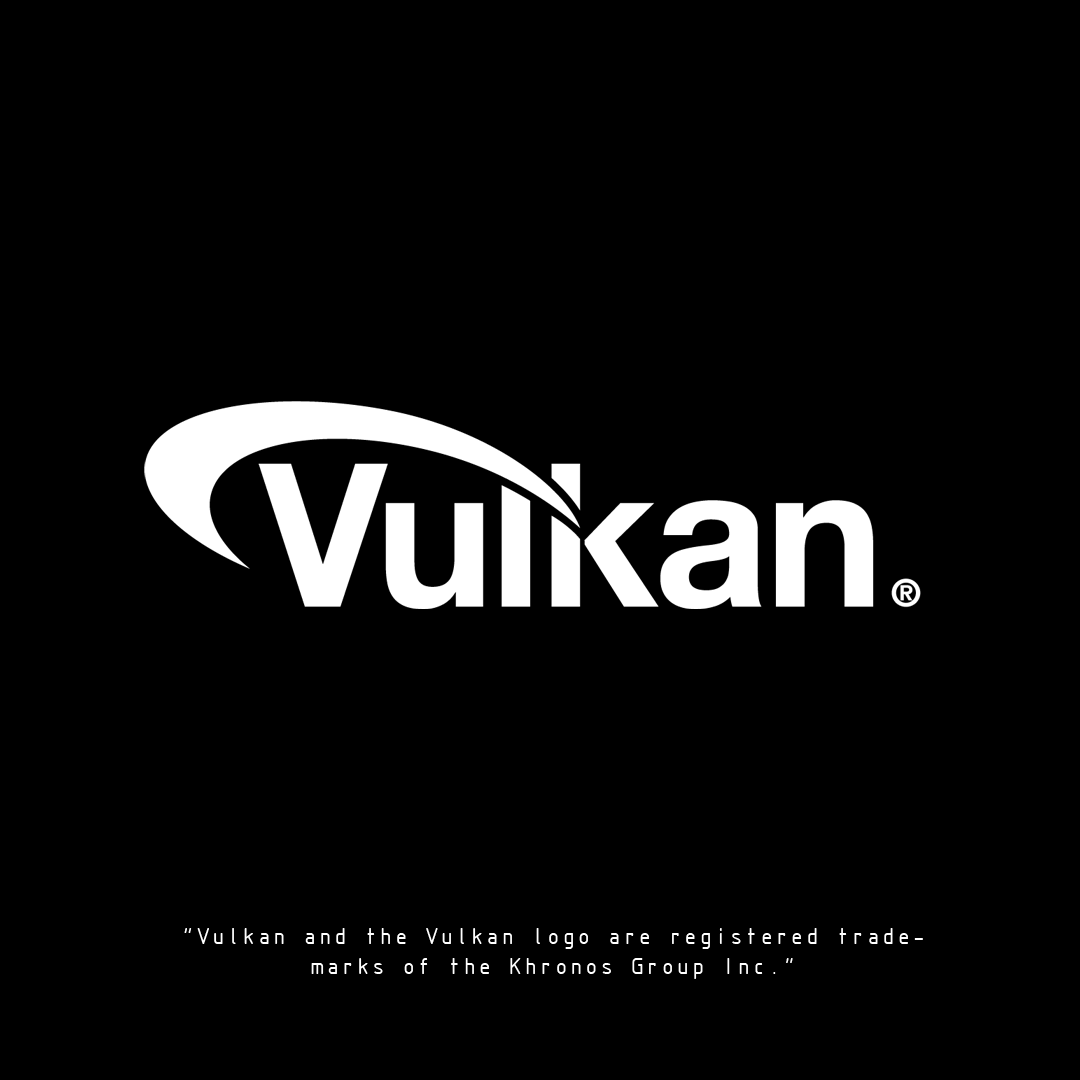
<style>
.page{position:relative;width:1080px;height:1080px;background:#000000}
.page>*{position:absolute;margin:0}
.t1{font:25px "ISOCTEUR";letter-spacing:-0.1em;color:#ffffff}
</style>
<div class="page">
<p class="t1" style="left:184px;top:928px;width:739px;height:51px;text-align:center">“Vulkan and the Vulkan logo are registered trademarks of the Khronos Group Inc.”</p>
</div>
